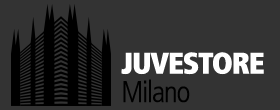
<style>
.page{position:relative;width:280px;height:110px;background:#333333}
.page>*{position:absolute;margin:0}
.t1{font:29.8px "FrutigerLTCom-ExtraBlackCn";letter-spacing:-0.04em;color:#ffffff}
.t2{font:29.8px "FrutigerLTCom-LightCn";letter-spacing:-0.04em;color:#000000}
</style>
<div class="page">
<p class="t1" style="left:121px;top:52px;width:143px;height:23px">JUVESTORE</p>
<p class="t2" style="left:123px;top:79px;width:67px;height:24px">Milano</p>
</div>
